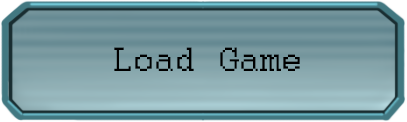
<style>
.page{position:relative;width:407px;height:122px}
.page>*{position:absolute;margin:0}
.t1{font:37.5px "Courier";color:#000000}
</style>
<div class="page">
<p class="t1" style="left:114px;top:47px;width:186px;height:24px">Load Game</p>
</div>
